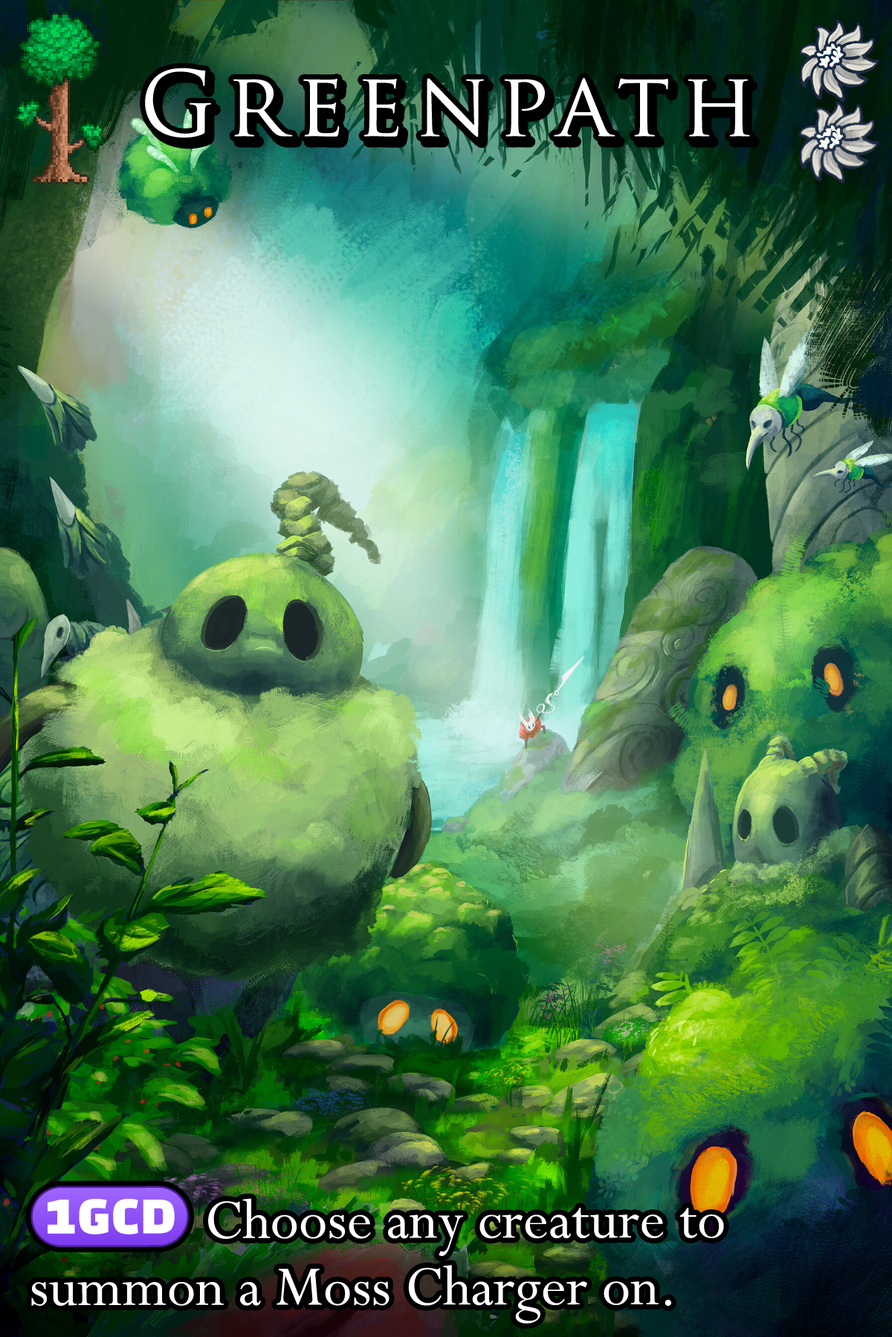
<style>
.page{position:relative;width:892px;height:1337px}
.page>*{position:absolute;margin:0}
.t1{font:151.6px "TrajanPro-Regular";letter-spacing:0.12em;color:#ffffff}
.t2{font:107px "Perpetua";color:#ffffff}
.t3{font:107px "stoogedings-Regular";color:#ffffff}
</style>
<div class="page">
<p class="t1" style="left:145px;top:68px;width:605px;height:70px">Greenpath</p>
<p class="t2" style="left:30px;top:1186px;width:694px;height:138px"><span class="t3">(1GCD)</span> Choose any creature to summon a Moss Charger on.</p>
</div>
